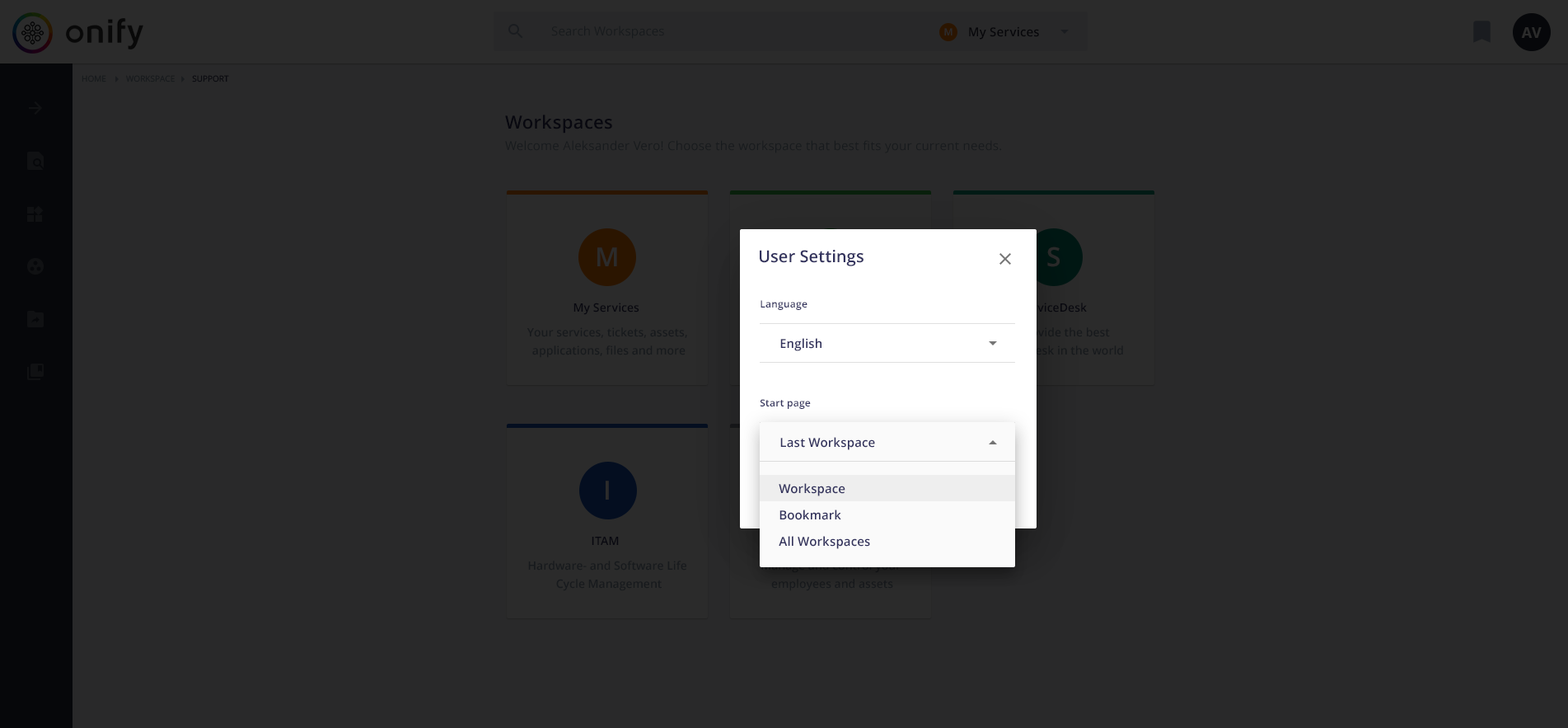
<style>
.page{position:relative;width:1568px;height:728px;background:#29292a}
.page>*{position:absolute;margin:0}
.t1{font:12.4px "OpenSans";letter-spacing:0.01em;color:#171a1d}
.t2{font:9.9px "OpenSans-Semibold";letter-spacing:0.01em;color:#2b2b2b}
.t3{font:12.4px "OpenSans-Semibold";letter-spacing:0.01em;color:#06060a}
.t4{font:14.8px "OpenSans-Bold";color:#2b2b2b;text-transform:uppercase}
.t5{font:8.2px "OpenSans";color:#171a1d;text-transform:uppercase}
.t6{font:8.2px "OpenSans";text-transform:uppercase}
.t7{font:18.1px "OpenSans-Semibold";letter-spacing:0.02em;color:#080810}
.t8{font:12.4px "OpenSans";letter-spacing:0.02em;color:#171a1d}
.t9{font:26.4px "OpenSans-Semibold";letter-spacing:0.005em;color:#2b2b2b}
.t10{font:16.5px "OpenSans-Semibold";letter-spacing:0.005em;color:#32325d}
.t11{font:26.4px "OpenSans-Semibold";letter-spacing:0.005em;color:#292929}
.t12{font:11.5px "OpenSans-Semibold";letter-spacing:0.005em;color:#080810}
.t13{font:9.9px "OpenSans-Semibold";letter-spacing:0.02em;color:#32325d}
.t14{font:11.5px/18.1px "OpenSans-Semibold";color:#171a1d}
.t15{font:12.4px "OpenSans-Semibold";letter-spacing:0.01em;color:#32325d}
</style>
<div class="page">
<p class="t1" style="left:551px;top:26px;width:113px;height:13px">Search Workspaces</p>
<p class="t2" style="left:944px;top:28px;width:9px;height:7px">M</p>
<p class="t3" style="left:969px;top:26px;width:70px;height:14px">My Services</p>
<p class="t4" style="left:1521px;top:27px;width:21px;height:11px">AV</p>
<p class="t5" style="left:82px;top:75px;width:24px;height:7px">Home</p>
<p class="t5" style="left:126px;top:75px;width:49px;height:7px">Workspace</p>
<p class="t6" style="left:192px;top:75px;width:37px;height:7px">Support</p>
<p class="t7" style="left:505px;top:115px;width:107px;height:18px">Workspaces</p>
<p class="t8" style="left:505px;top:140px;width:497px;height:13px">Welcome Aleksander Vero! Choose the workspace that best fits your current needs.</p>
<p class="t9" style="left:597px;top:247px;width:20px;height:19px">M</p>
<p class="t10" style="left:760px;top:250px;width:104px;height:16px">User Settings</p>
<p class="t11" style="left:1047px;top:246px;width:13px;height:21px">S</p>
<p class="t12" style="left:573px;top:302px;width:66px;height:13px">My Services</p>
<p class="t13" style="left:761px;top:300px;width:46px;height:10px">Language</p>
<p class="t14" style="left:527px;top:327px;width:160px;height:31px;text-align:center">Your services, tickets, assets, <br>applications, files and more</p>
<p class="t15" style="left:780px;top:338px;width:41px;height:13px">English</p>
<p class="t13" style="left:760px;top:399px;width:51px;height:10px">Start page</p>
<p class="t15" style="left:780px;top:437px;width:95px;height:13px">Last Workspace</p>
<p class="t15" style="left:780px;top:437px;width:95px;height:13px">Last Workspace</p>
<p class="t9" style="left:606px;top:480px;width:3px;height:19px">I</p>
<p class="t15" style="left:779px;top:483px;width:66px;height:13px">Workspace</p>
<p class="t15" style="left:779px;top:509px;width:62px;height:11px">Bookmark</p>
<p class="t12" style="left:592px;top:536px;width:27px;height:9px">ITAM</p>
<p class="t15" style="left:779px;top:536px;width:91px;height:13px">All Workspaces</p>
<p class="t14" style="left:528px;top:560px;width:158px;height:31px;text-align:center">Hardware- and Software Life <br>Cycle Management</p>
</div>
